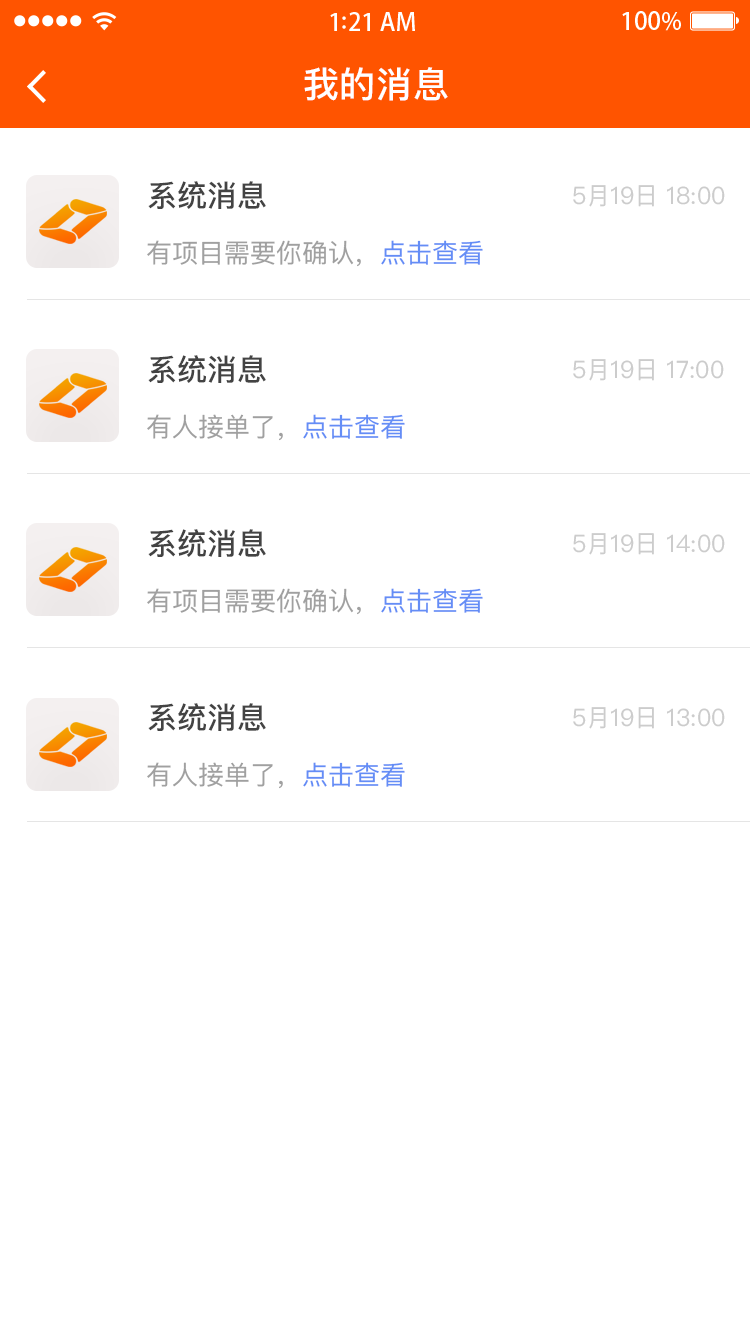
<style>
.page{position:relative;width:750px;height:1334px;background:#ffffff}
.page>*{position:absolute;margin:0}
.t1{font:36px "PingFangSC-Medium";letter-spacing:0.02em;color:#ffffff}
.t2{font:30px "PingFangSC-Medium";color:#434343}
.t3{font:24px "PingFangSC-Regular";color:#cccccc}
.t4{font:26px "PingFangSC-Regular";color:#a0a0a0}
.t5{font:26px "PingFangSC-Regular";color:#648df6}
</style>
<div class="page">
<p class="t1" style="left:304px;top:67px;width:144px;height:34px">我的消息</p>
<p class="t2" style="left:148px;top:181px;width:118px;height:28px">系统消息</p>
<p class="t3" style="left:573px;top:185px;width:152px;height:22px">5月19日 18:00</p>
<p class="t4" style="left:147px;top:240px;width:336px;height:27px">有项目需要你确认，<span class="t5">点击查看</span></p>
<p class="t2" style="left:148px;top:355px;width:118px;height:28px">系统消息</p>
<p class="t3" style="left:573px;top:359px;width:151px;height:22px">5月19日 17:00</p>
<p class="t4" style="left:147px;top:414px;width:258px;height:27px">有人接单了，<span class="t5">点击查看</span></p>
<p class="t2" style="left:148px;top:529px;width:118px;height:28px">系统消息</p>
<p class="t3" style="left:573px;top:533px;width:152px;height:22px">5月19日 14:00</p>
<p class="t4" style="left:147px;top:588px;width:336px;height:27px">有项目需要你确认，<span class="t5">点击查看</span></p>
<p class="t2" style="left:148px;top:703px;width:118px;height:28px">系统消息</p>
<p class="t3" style="left:573px;top:707px;width:152px;height:22px">5月19日 13:00</p>
<p class="t4" style="left:147px;top:762px;width:258px;height:27px">有人接单了，<span class="t5">点击查看</span></p>
</div>
